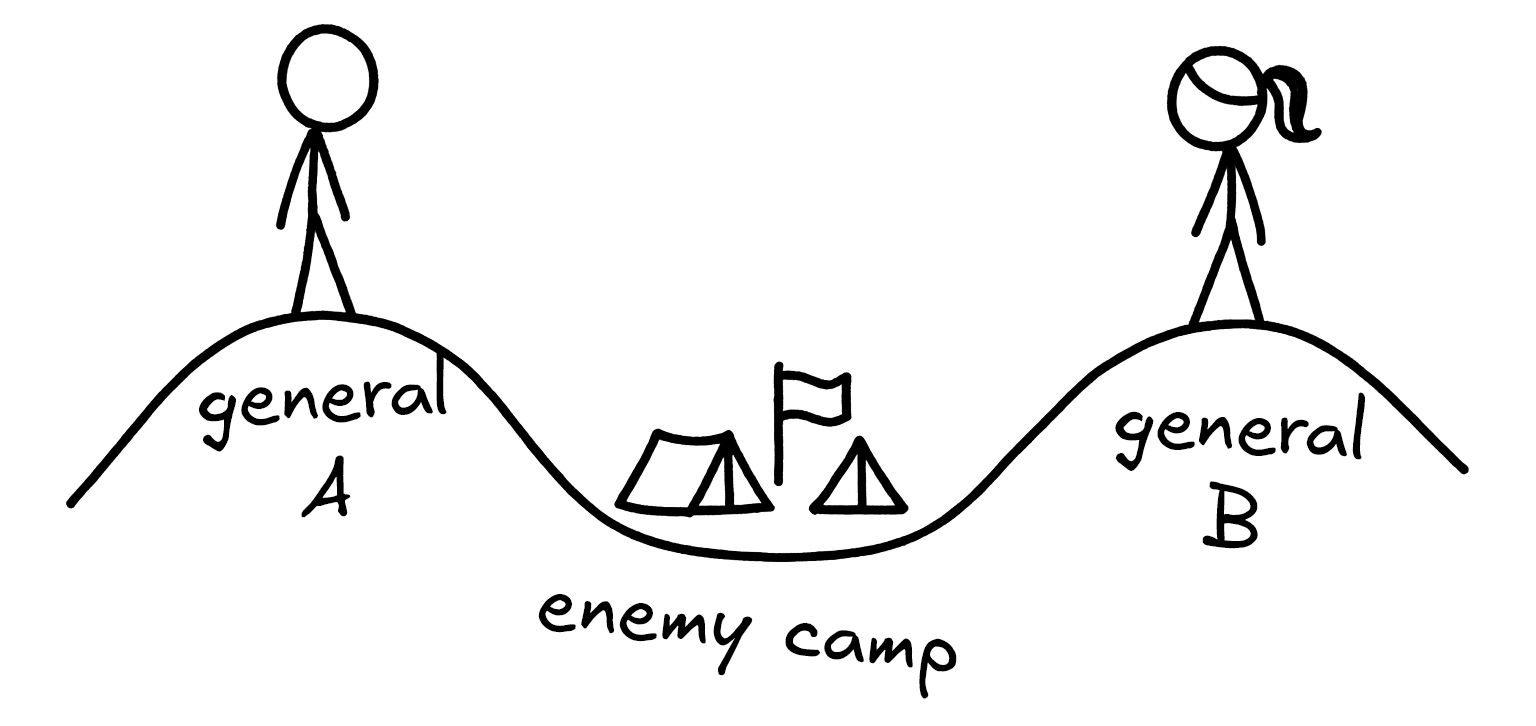
<style>
.page{position:relative;width:1536px;height:726px;background:#ffffff}
.page>*{position:absolute;margin:0}
.t1{font:79px "Excalifont-Regular";color:#000000}
</style>
<div class="page">
<p class="t1" style="left:198px;top:347px;width:249px;height:171px;text-align:center;rotate:-2deg">general<br>A</p>
<p class="t1" style="left:1115px;top:392px;width:250px;height:157px;text-align:center;rotate:4deg">general<br>B</p>
<p class="t1" style="left:538px;top:594px;width:419px;height:105px;rotate:7deg">enemy camp</p>
</div>
